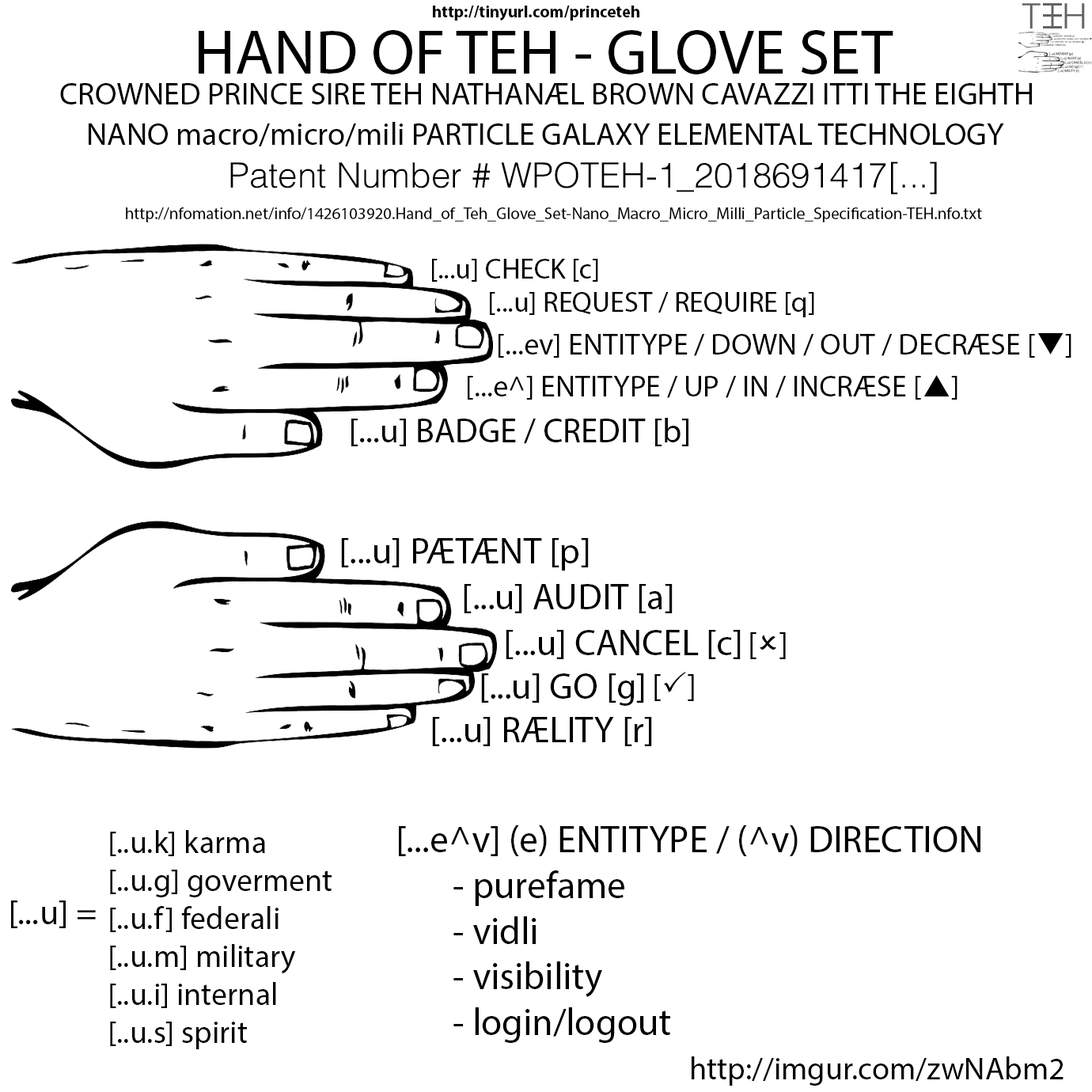
<style>
.page{position:relative;width:1092px;height:1092px;background:#ffffff}
.page>*{position:absolute;margin:0}
.t1{font:16.6px "MyriadPro-Bold";color:#000000}
.t2{font:63.3px "MyriadPro-Regular";color:#000000}
.t3{font:31.7px "MyriadPro-Regular";color:#000000}
.t4{font:34.8px "Helvetica-Light";color:#000000}
.t5{font:16.6px "MyriadPro-Regular";color:#000000}
.t6{font:28.4px "MyriadPro-Regular";color:#000000}
.t7{font:30.1px "MyriadPro-Regular";color:#000000}
.t8{font:30.1px "Wingdings3";color:#000000}
.t9{font:34.1px "MyriadPro-Regular";color:#000000}
.t10{font:36.5px "MyriadPro-Regular";color:#000000}
.t11{font:33.4px "MyriadPro-Regular";color:#000000}
.t12{font:33.4px "Wingdings2";color:#000000}
.t13{font:38px "MyriadPro-Regular";color:#000000}
.t14{font:34.8px "MyriadPro-Regular";color:#000000}
</style>
<div class="page">
<p class="t1" style="left:433px;top:6px;width:206px;height:15px">http://tinyurl.com/princeteh</p>
<p class="t2" style="left:199px;top:30px;width:694px;height:44px">HAND OF TEH - GLOVE SET</p>
<p class="t3" style="left:60px;top:83px;width:972px;height:21px">CROWNED PRINCE SIRE TEH NATHANÆL BROWN CAVAZZI ITTI THE EIGHTH</p>
<p class="t3" style="left:89px;top:122px;width:915px;height:24px">NANO macro/micro/mili PARTICLE GALAXY ELEMENTAL TECHNOLOGY</p>
<p class="t4" style="left:230px;top:161px;width:707px;height:34px">Patent Number # WPOTEH-1_2018691417[...]</p>
<p class="t5" style="left:126px;top:207px;width:856px;height:15px">http://nfomation.net/info/1426103920.Hand_of_Teh_Glove_Set-Nano_Macro_Micro_Milli_Particle_Specification-TEH.nfo.txt</p>
<p class="t6" style="left:432px;top:259px;width:166px;height:23px">[...u] CHECK [c]</p>
<p class="t6" style="left:490px;top:292px;width:324px;height:25px">[...u] REQUEST / REQUIRE [q]</p>
<p class="t7" style="left:499px;top:333px;width:572px;height:25px">[...ev] ENTITYPE / DOWN / OUT / DECRÆSE [<span class="t8">q</span>]</p>
<p class="t7" style="left:468px;top:375px;width:489px;height:25px">[...e^] ENTITYPE / UP / IN / INCRÆSE [<span class="t8">p</span>]</p>
<p class="t9" style="left:351px;top:418px;width:337px;height:28px">[...u] BADGE / CREDIT [b]</p>
<p class="t10" style="left:341px;top:538px;width:248px;height:33px">[...u] PÆTÆNT [p]</p>
<p class="t10" style="left:464px;top:584px;width:209px;height:29px">[...u] AUDIT [a]</p>
<p class="t10" style="left:506px;top:630px;width:280px;height:29px">[...u] CANCEL [c] <span class="t11">[</span><span class="t12">O</span><span class="t11">]</span></p>
<p class="t10" style="left:481px;top:673px;width:163px;height:33px">[...u] GO [g]</p>
<p class="t11" style="left:654px;top:672px;width:40px;height:29px">[<span class="t12">P</span>]</p>
<p class="t10" style="left:432px;top:717px;width:220px;height:29px">[...u] RÆLITY [r]</p>
<p class="t3" style="left:110px;top:830px;width:222px;height:219px">[..u.k] karma<br>[..u.g] goverment<br>[..u.f] federali<br>[..u.m] military<br>[..u.i] internal<br>[..u.s] spirit</p>
<p class="t13" style="left:399px;top:825px;width:581px;height:218px">[...e^v] (e) ENTITYPE / (^v) DIRECTION<br>  - purefame<br>  - vidli<br>  - visibility<br>  - login/logout</p>
<p class="t14" style="left:11px;top:900px;width:85px;height:28px">[...u] =</p>
<p class="t3" style="left:692px;top:1056px;width:371px;height:30px">http://imgur.com/zwNAbm2</p>
</div>
